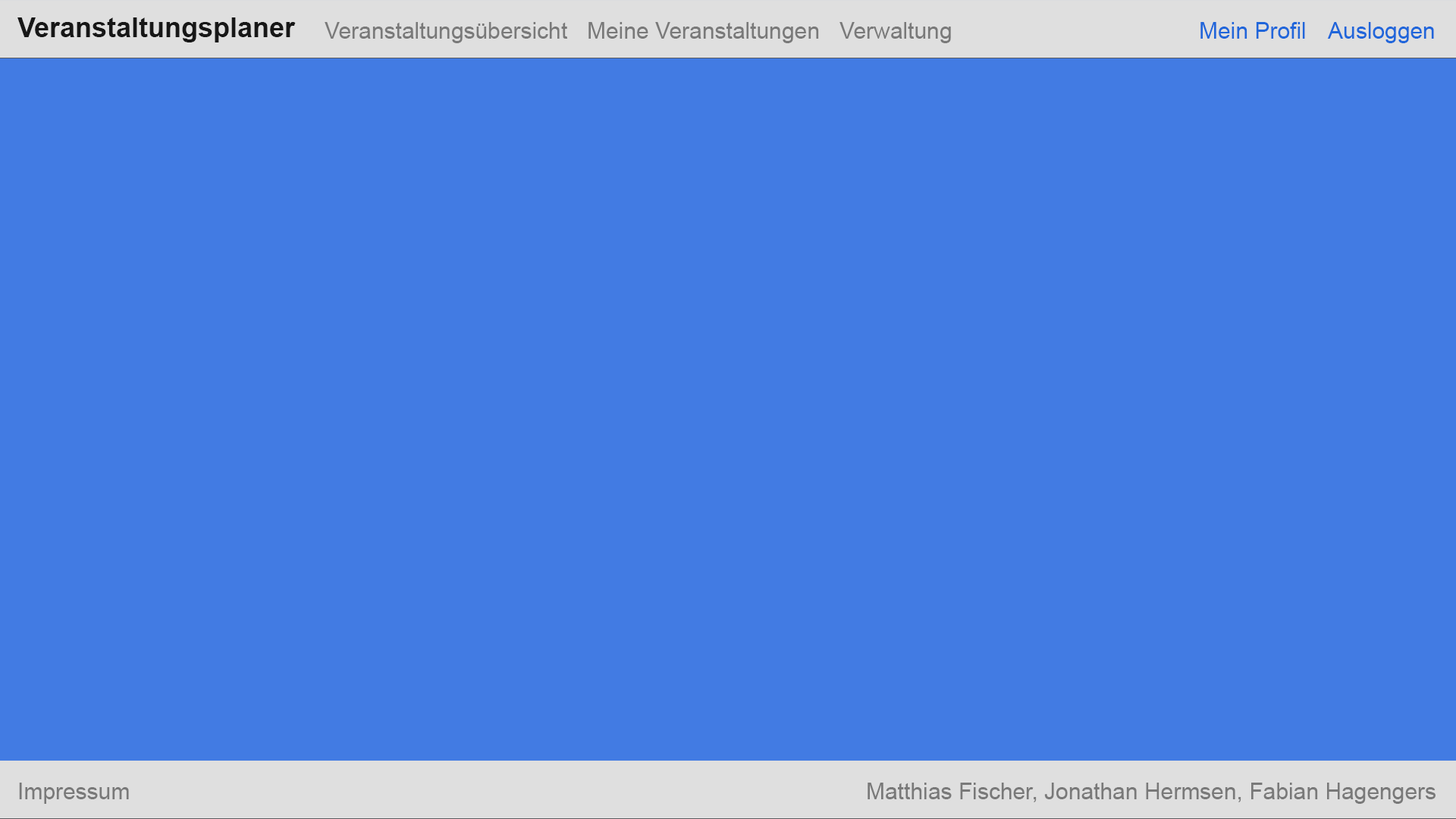
<style>
.page{position:relative;width:1456px;height:819px;background:#427be3}
.page>*{position:absolute;margin:0}
.t1{font:27.3px "Arial-BoldMT";color:#171717}
.t2{font:22.7px "ArialMT";color:#797979}
.t3{font:22.7px "ArialMT";color:#2066da}
</style>
<div class="page">
<p class="t1" style="left:17px;top:17px;width:279px;height:25px">Veranstaltungsplaner</p>
<p class="t2" style="left:325px;top:22px;width:242px;height:21px">Veranstaltungsübersicht</p>
<p class="t2" style="left:588px;top:22px;width:231px;height:21px">Meine Veranstaltungen</p>
<p class="t2" style="left:839px;top:22px;width:112px;height:21px">Verwaltung</p>
<p class="t3" style="left:1200px;top:22px;width:105px;height:17px">Mein Profil</p>
<p class="t3" style="left:1327px;top:22px;width:107px;height:21px">Ausloggen</p>
<p class="t2" style="left:19px;top:783px;width:110px;height:21px">Impressum</p>
<p class="t2" style="left:868px;top:783px;width:568px;height:21px">Matthias Fischer, Jonathan Hermsen, Fabian Hagengers</p>
</div>
